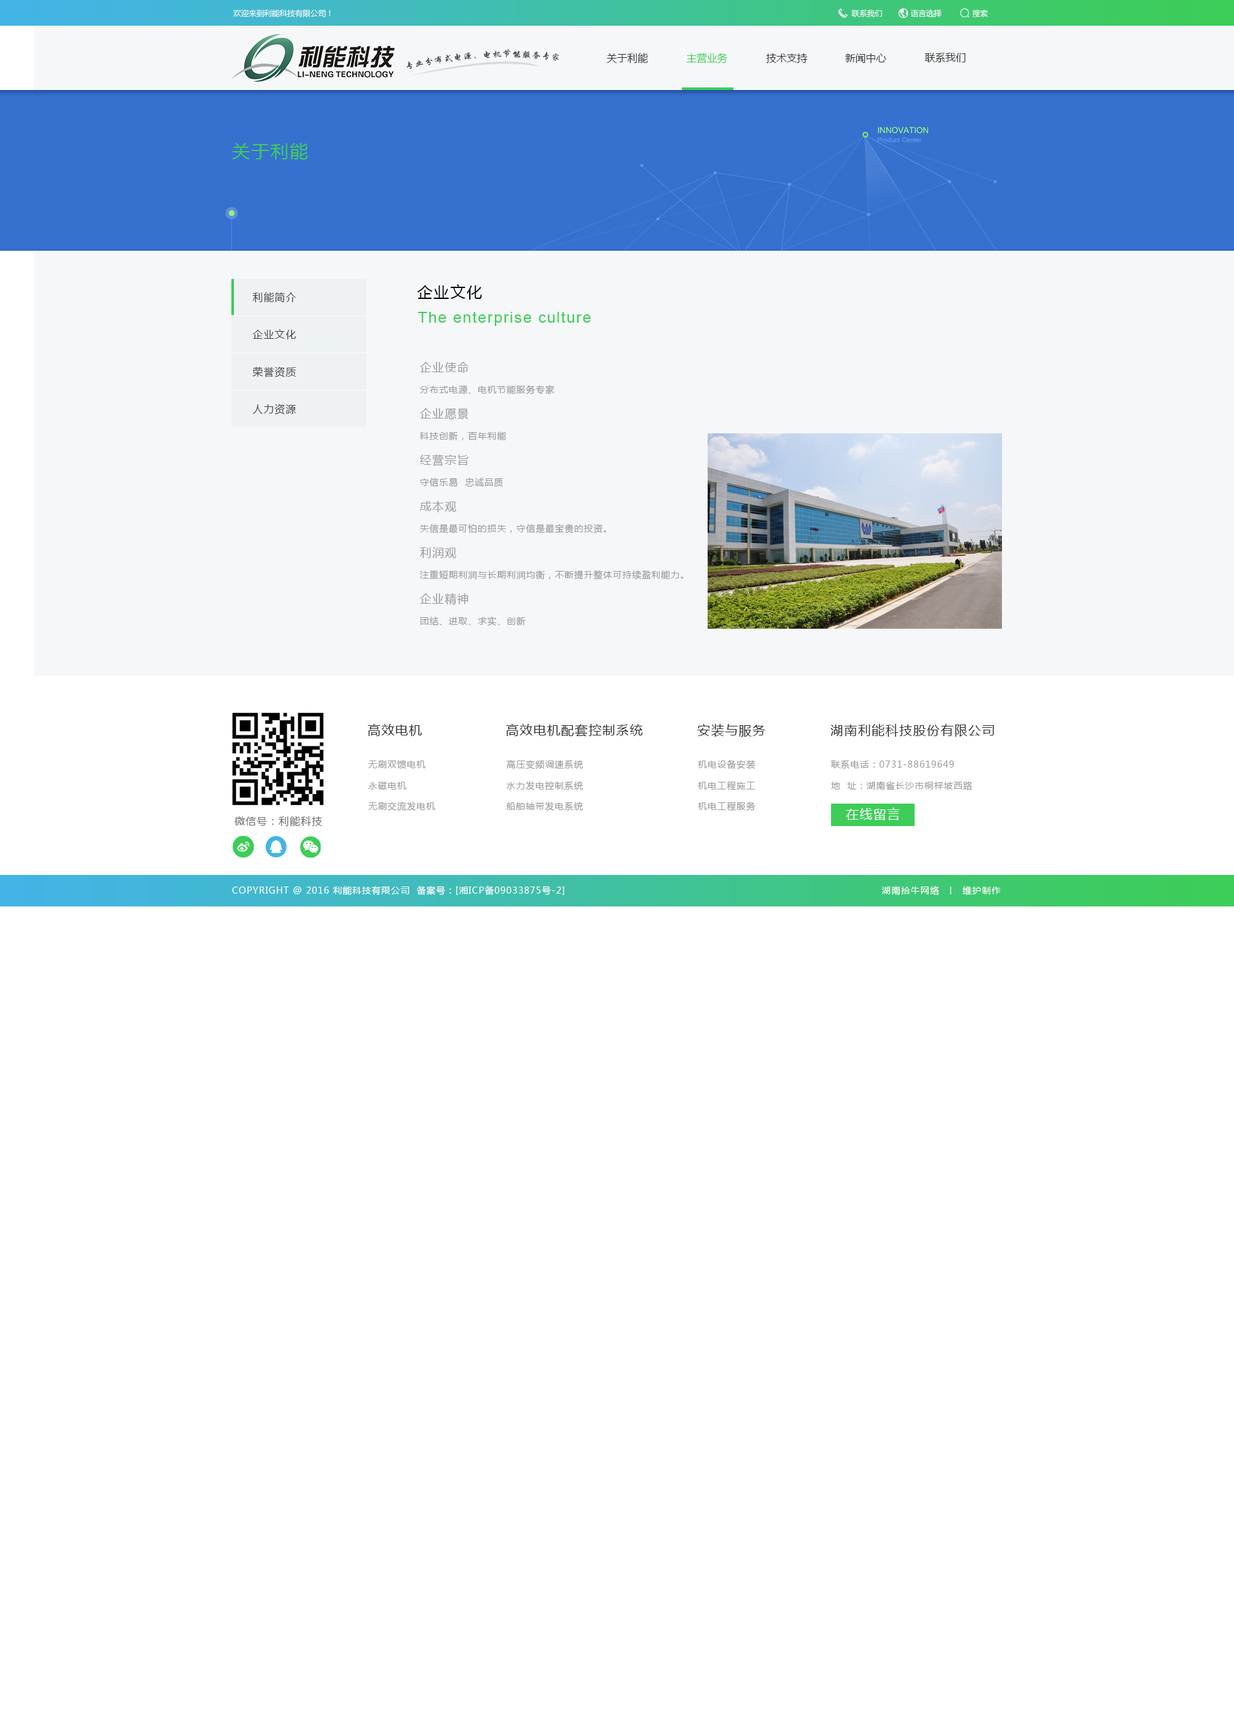
<style>
.page{position:relative;width:1234px;height:1712px;background:#ffffff}
.page>*{position:absolute;margin:0}
.t1{font:7.7px "MicrosoftYaHei";color:#f6f7f9}
.t2{font:9px "SingkaiCSEG-Bold-GB";color:#343434}
.t3{font:10.3px "MicrosoftYaHei";color:#343434}
.t4{font:10.3px "MicrosoftYaHei";color:#3dcd58}
.t5{font:18px "MicrosoftYaHei";letter-spacing:0.072em;color:#3dcd58}
.t6{font:10.3px "MicrosoftYaHei";letter-spacing:0.072em;color:#444444}
.t7{font:15.4px "MicrosoftYaHei";letter-spacing:0.072em;color:#000000}
.t8{font:15.4px "ArialMT";letter-spacing:0.072em;color:#3dcd58}
.t9{font:9px/23.1px "MicrosoftYaHei";letter-spacing:0.072em;color:#999999}
.t10{font:11.6px/23.1px "MicrosoftYaHei";letter-spacing:0.072em;color:#999999}
.t11{font:12.9px "MicrosoftYaHei";letter-spacing:0.072em;color:#323232}
.t12{font:9px "MicrosoftYaHei";letter-spacing:0.072em;color:#9a9a9a}
.t13{font:12.9px "MicrosoftYaHei";letter-spacing:0.072em;color:#ffffff}
.t14{font:10.3px "MicrosoftYaHei";letter-spacing:0.072em;color:#676767}
.t15{font:9px "MicrosoftYaHei";letter-spacing:0.072em;color:#ffffff}
</style>
<div class="page">
<p class="t1" style="left:233px;top:9px;width:97px;height:8px">欢迎来到利能科技有限公司！</p>
<p class="t1" style="left:851px;top:10px;width:32px;height:7px">联系我们</p>
<p class="t1" style="left:911px;top:9px;width:31px;height:8px">语言选择</p>
<p class="t1" style="left:973px;top:9px;width:15px;height:8px">搜索</p>
<p class="t2" style="left:406px;top:49px;width:153px;height:20px;rotate:-3deg">专业分布式电源、电机节能服务专家</p>
<p class="t3" style="left:607px;top:53px;width:41px;height:10px">关于利能</p>
<p class="t4" style="left:687px;top:53px;width:41px;height:11px">主营业务</p>
<p class="t3" style="left:766px;top:53px;width:41px;height:10px">技术支持</p>
<p class="t3" style="left:845px;top:53px;width:41px;height:10px">新闻中心</p>
<p class="t3" style="left:925px;top:53px;width:41px;height:10px">联系我们</p>
<p class="t5" style="left:232px;top:143px;width:76px;height:16px">关于利能</p>
<p class="t6" style="left:253px;top:292px;width:43px;height:11px">利能简介</p>
<p class="t7" style="left:417px;top:284px;width:65px;height:16px">企业文化</p>
<p class="t8" style="left:418px;top:311px;width:173px;height:15px">The enterprise culture</p>
<p class="t6" style="left:253px;top:329px;width:43px;height:10px">企业文化</p>
<p class="t9" style="left:420px;top:362px;width:263px;height:264px"><span class="t10">企业使命<br></span>分布式电源、电机节能服务专家<br><span class="t10">企业愿景<br></span>科技创新，百年利能<br><span class="t10">经营宗旨<br></span>守信乐易  忠诚品质<br><span class="t10">成本观<br></span>失信是最可怕的损失，守信是最宝贵的投资。<br><span class="t10">利润观<br></span>注重短期利润与长期利润均衡，不断提升整体可持续盈利能力。<br><span class="t10">企业精神<br></span>团结、进取、求实、创新</p>
<p class="t6" style="left:253px;top:366px;width:43px;height:11px">荣誉资质</p>
<p class="t6" style="left:253px;top:404px;width:43px;height:11px">人力资源</p>
<p class="t11" style="left:368px;top:724px;width:54px;height:12px">高效电机</p>
<p class="t11" style="left:506px;top:724px;width:137px;height:13px">高效电机配套控制系统</p>
<p class="t11" style="left:697px;top:724px;width:69px;height:13px">安装与服务</p>
<p class="t11" style="left:831px;top:724px;width:163px;height:13px">湖南利能科技股份有限公司</p>
<p class="t12" style="left:368px;top:760px;width:58px;height:9px">无刷双馈电机</p>
<p class="t12" style="left:507px;top:760px;width:76px;height:9px">高压变频调速系统</p>
<p class="t12" style="left:698px;top:760px;width:57px;height:9px">机电设备安装</p>
<p class="t12" style="left:831px;top:760px;width:123px;height:9px">联系电话：0731-88619649</p>
<p class="t12" style="left:368px;top:781px;width:38px;height:9px">永磁电机</p>
<p class="t12" style="left:507px;top:781px;width:76px;height:9px">水力发电控制系统</p>
<p class="t12" style="left:698px;top:781px;width:57px;height:10px">机电工程施工</p>
<p class="t12" style="left:831px;top:781px;width:142px;height:10px">地  址：湖南省长沙市桐梓坡西路</p>
<p class="t12" style="left:368px;top:802px;width:67px;height:9px">无刷交流发电机</p>
<p class="t12" style="left:507px;top:802px;width:76px;height:9px">船舶轴带发电系统</p>
<p class="t12" style="left:698px;top:802px;width:57px;height:9px">机电工程服务</p>
<p class="t13" style="left:846px;top:807px;width:54px;height:13px">在线留言</p>
<p class="t14" style="left:235px;top:816px;width:87px;height:11px">微信号：利能科技</p>
<p class="t15" style="left:232px;top:886px;width:332px;height:9px">COPYRIGHT @ 2016 利能科技有限公司  备案号：[湘ICP备09033875号-2]</p>
<p class="t15" style="left:882px;top:886px;width:119px;height:9px">湖南拾牛网络  丨  维护制作</p>
</div>
